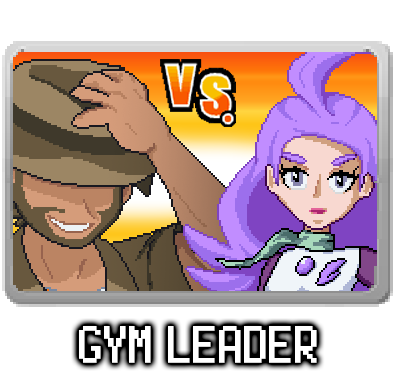
<style>
.page{position:relative;width:394px;height:380px;background:#ffffff}
.page>*{position:absolute;margin:0}
.t1{font:52px "Power-Green";color:#ffffff;font-weight:bold}
</style>
<div class="page">
<p class="t1" style="left:79px;top:326px;width:238px;height:37px">GYM LEADER</p>
</div>
